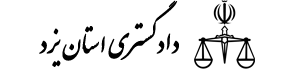
<style>
.page{position:relative;width:300px;height:70px;background:#ffffff}
.page>*{position:absolute;margin:0}
.t1{font:28.5px/33.3px "IranNastaliq";color:#000000;font-weight:bold}
</style>
<div class="page">
<p class="t1" style="left:39px;top:0px;width:140px;height:67px;text-align:right">دادگستری استان یزد</p>
</div>
